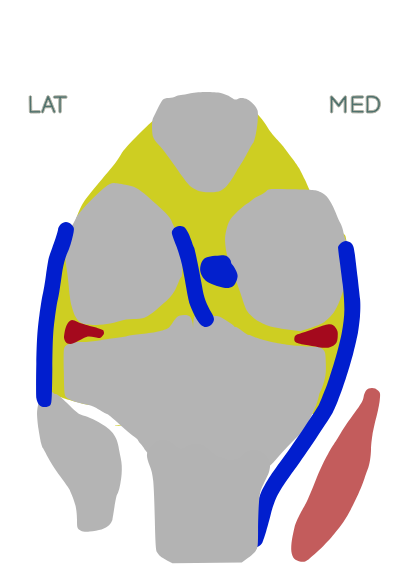
<style>
.page{position:relative;width:400px;height:568px;background:#ffffff}
.page>*{position:absolute;margin:0}
.t1{font:24px "BalsamiqSans-Regular";color:#597772}
</style>
<div class="page">
<p class="t1" style="left:28px;top:94px;width:354px;height:21px">LAT         MED</p>
</div>
